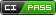
<style>
.page{position:relative;width:56px;height:15px}
.page>*{position:absolute;margin:0}
.t1{font:10.4px "VisitorTT1BRK";letter-spacing:-0.02em;color:#ffffff}
</style>
<div class="page">
<p class="t1" style="left:5px;top:5px;width:11px;height:5px">CI</p>
<p class="t1" style="left:28px;top:5px;width:23px;height:5px">PASS</p>
</div>
